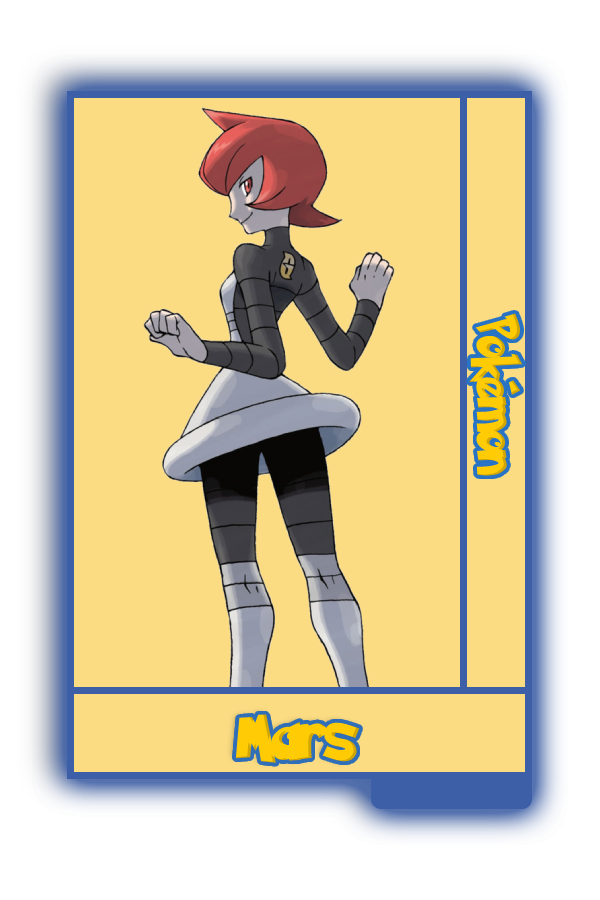
<style>
.page{position:relative;width:600px;height:900px;background:#fbdc83}
.page>*{position:absolute;margin:0}
.t1{font:48.8px "PokemonSolidNormal";color:#ffcb05;scale:0.8 1}
.t2{font:56.6px "PokemonSolidNormal";color:#ffcb05;scale:0.92 1}
</style>
<div class="page">
<p class="t1" style="left:469px;top:313px;width:54px;height:163px;rotate:90deg">Pokémon</p>
<p class="t2" style="left:235px;top:714px;width:125px;height:49px">Mars</p>
</div>
